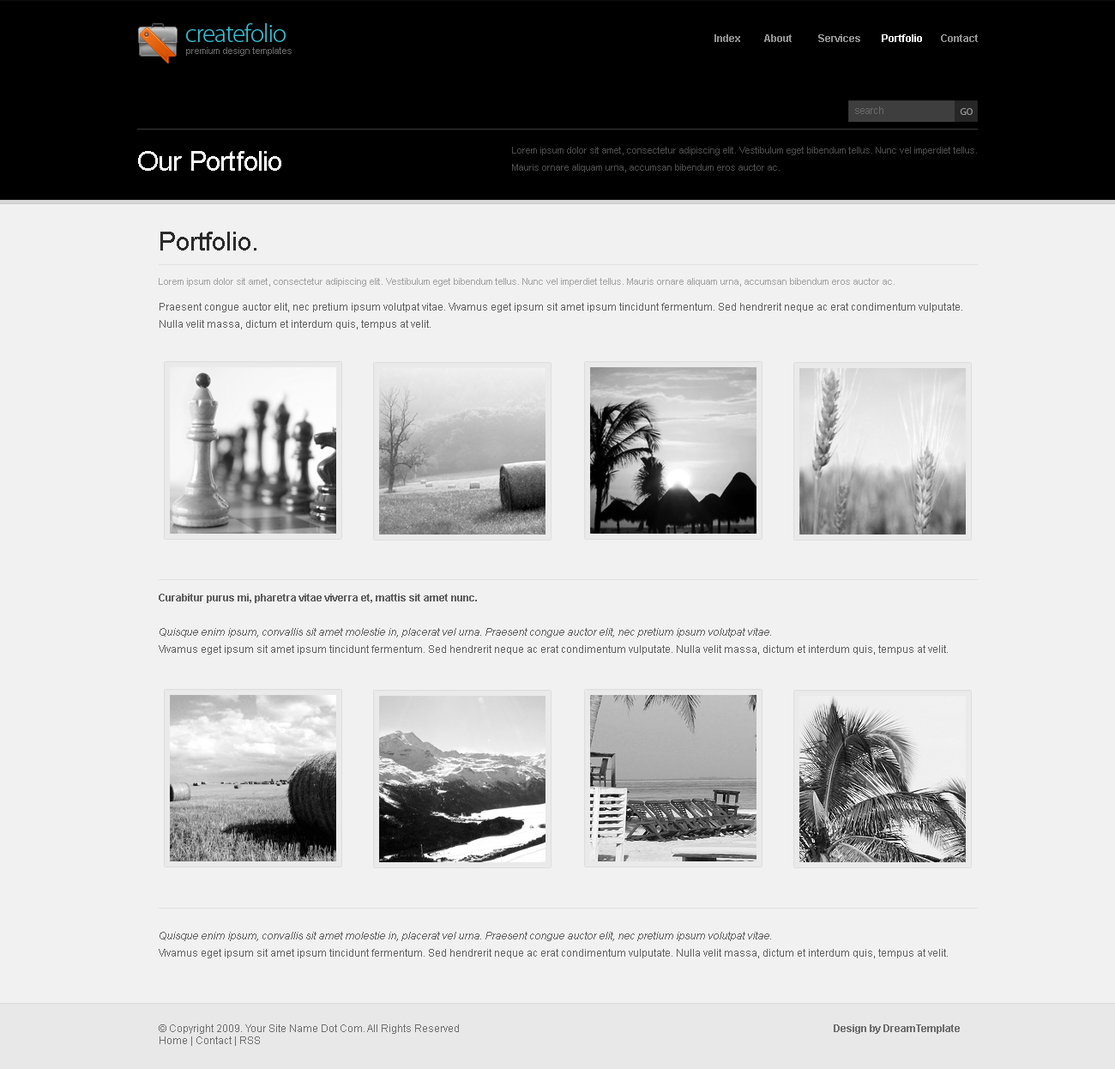
<style>
.page{position:relative;width:1115px;height:1069px;background:#f1f1f1}
.page>*{position:absolute;margin:0}
.t1{font:25.7px "MyriadPro-Light";letter-spacing:-0.025em;color:#37c0d4}
.t2{font:10.3px "Arial-BoldMT";color:#909090}
.t3{font:10.3px "Arial-BoldMT";color:#ffffff}
.t4{font:9.4px "ArialMT";color:#686868}
.t5{font:10.3px "ArialMT";color:#6a6a6a}
.t6{font:9.4px "MyriadPro-Regular";color:#979797}
.t7{font:9.4px/17.2px "ArialMT";color:#4d4d4d}
.t8{font:27.5px "ArialMT";letter-spacing:-0.025em;color:#ffffff}
.t9{font:9.4px/17.2px "ArialMT";color:#a4a4a4}
.t10{font:25.7px/17.2px "ArialMT";color:#2a2a2a}
.t11{font:10.3px/17.2px "ArialMT";color:#5f5f5f}
.t12{font:10.3px/17.2px "Arial-BoldMT";color:#5f5f5f}
.t13{font:10.3px/17.2px "Arial-ItalicMT";color:#5f5f5f}
.t14{font:10.3px "ArialMT";color:#6d6d6d}
.t15{font:10.3px "Arial-BoldMT";color:#6d6d6d}
</style>
<div class="page">
<p class="t1" style="left:186px;top:23px;width:100px;height:19px">createfolio</p>
<p class="t2" style="left:715px;top:34px;width:263px;height:8px">Index         About          Services        <span class="t3">Portfolio</span>       Contact</p>
<p class="t4" style="left:186px;top:47px;width:106px;height:9px">premium design templates</p>
<p class="t5" style="left:855px;top:106px;width:29px;height:8px">search</p>
<p class="t6" style="left:960px;top:108px;width:13px;height:7px">GO</p>
<p class="t7" style="left:512px;top:147px;width:465px;height:25px">Lorem ipsum dolor sit amet, consectetur adipiscing elit. Vestibulum eget bibendum tellus. Nunc vel imperdiet tellus. Mauris ornare aliquam urna, accumsan bibendum eros auctor ac.</p>
<p class="t8" style="left:138px;top:151px;width:143px;height:20px">Our Portfolio</p>
<p class="t9" style="left:159px;top:232px;width:736px;height:55px"><span class="t10">Portfolio.<br><br></span>Lorem ipsum dolor sit amet, consectetur adipiscing elit. Vestibulum eget bibendum tellus. Nunc vel imperdiet tellus. Mauris ornare aliquam urna, accumsan bibendum eros auctor ac.</p>
<p class="t11" style="left:160px;top:303px;width:803px;height:26px">Praesent congue auctor elit, nec pretium ipsum volutpat vitae. Vivamus eget ipsum sit amet ipsum tincidunt fermentum. Sed hendrerit neque ac erat condimentum vulputate. Nulla velit massa, dictum et interdum quis, tempus at velit.</p>
<p class="t11" style="left:159px;top:594px;width:789px;height:61px"><span class="t12">Curabitur purus mi, pharetra vitae viverra et, mattis sit amet nunc. <br><br></span><span class="t13">Quisque enim ipsum, convallis sit amet molestie in, placerat vel urna. Praesent congue auctor elit, nec pretium ipsum volutpat vitae. <br></span>Vivamus eget ipsum sit amet ipsum tincidunt fermentum. Sed hendrerit neque ac erat condimentum vulputate. Nulla velit massa, dictum et interdum quis, tempus at velit.</p>
<p class="t11" style="left:159px;top:932px;width:789px;height:26px"><span class="t13">Quisque enim ipsum, convallis sit amet molestie in, placerat vel urna. Praesent congue auctor elit, nec pretium ipsum volutpat vitae. <br></span>Vivamus eget ipsum sit amet ipsum tincidunt fermentum. Sed hendrerit neque ac erat condimentum vulputate. Nulla velit massa, dictum et interdum quis, tempus at velit.</p>
<p class="t14" style="left:159px;top:1024px;width:300px;height:22px">© Copyright 2009. Your Site Name Dot Com. All Rights Reserved<br>Home | Contact | RSS</p>
<p class="t15" style="left:834px;top:1024px;width:126px;height:10px">Design by DreamTemplate</p>
</div>
